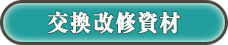
<style>
.page{position:relative;width:228px;height:45px}
.page>*{position:absolute;margin:0}
.t1{font:23px "RyuminPr6N-ExBold";letter-spacing:0.075em;color:#ffffff;font-weight:bold;scale:0.9 1}
</style>
<div class="page">
<p class="t1" style="left:48px;top:11px;width:133px;height:23px">交換改修資材</p>
</div>
